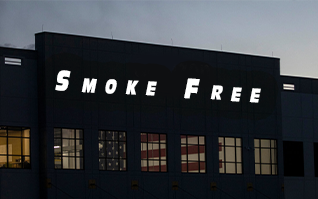
<style>
.page{position:relative;width:318px;height:199px}
.page>*{position:absolute;margin:0}
.t1{font:51.1px "AntiqueOliCom-Reg";letter-spacing:0.62em;color:#ffffff;font-variant:small-caps;font-style:italic;scale:0.72 1}
</style>
<div class="page">
<p class="t1" style="left:55px;top:70px;width:206px;height:33px;rotate:3deg">Smoke Free</p>
</div>
